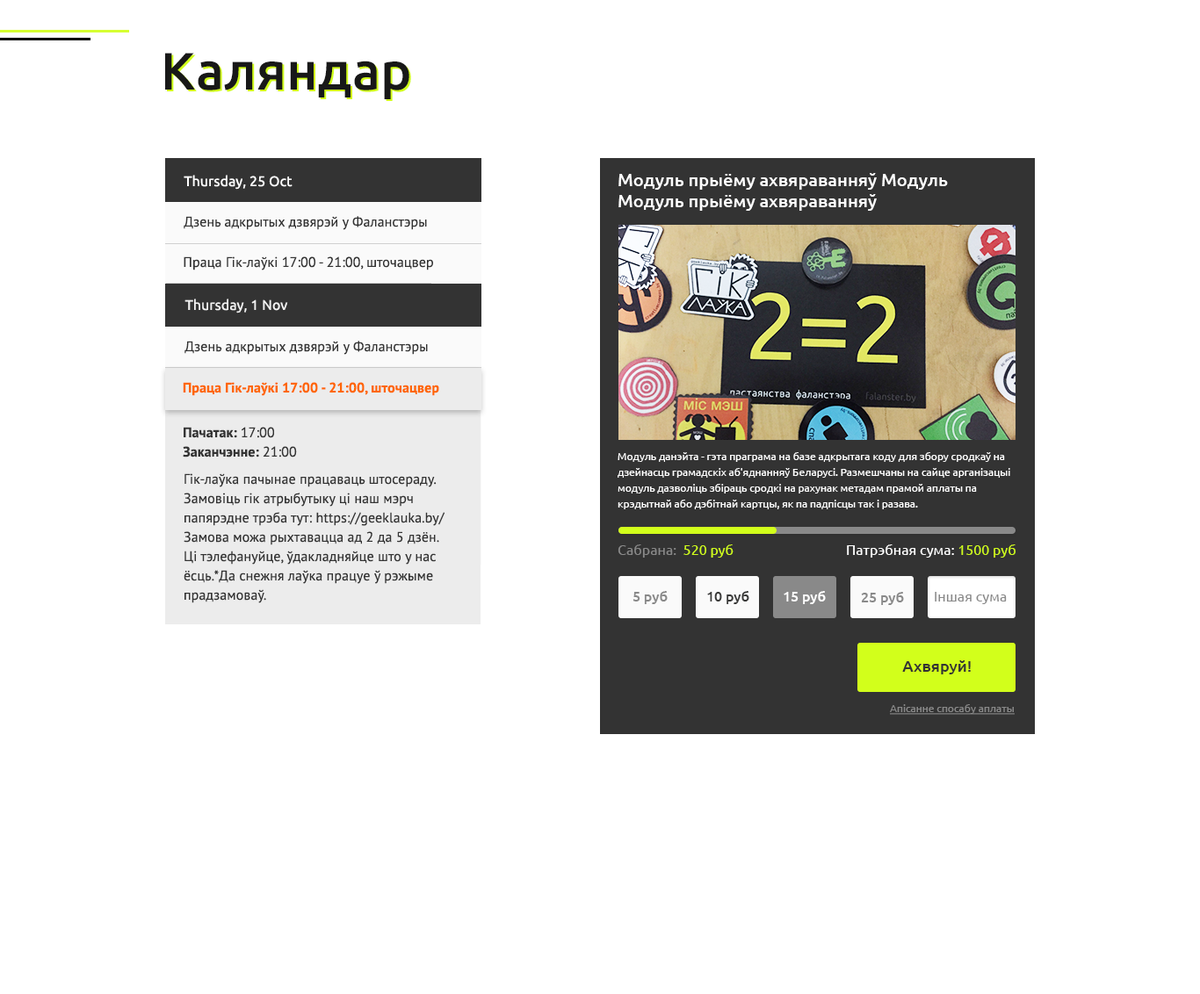
<style>
.page{position:relative;width:1200px;height:994px;background:#ffffff}
.page>*{position:absolute;margin:0}
.t1{font:52.7px "Ubuntu-Medium";letter-spacing:0.005em;color:#181818}
.t2{font:52.7px "Ubuntu-Medium";letter-spacing:0.005em}
.t3{font:17.6px/21.1px "Ubuntu-Medium";color:#ffffff}
.t4{font:14.1px "Ubuntu-Regular";letter-spacing:0.005em;color:#ffffff}
.t5{font:14.1px "PTSans-Regular";letter-spacing:0.005em;color:#333333}
.t6{font:14.1px "Ubuntu-Regular";letter-spacing:0.005em;color:#f2f2f2}
.t7{font:14.1px "PTSans-Bold";letter-spacing:0.005em;color:#ff6600}
.t8{font:14.1px/19.3px "PTSans-Bold";letter-spacing:0.005em;color:#333333}
.t9{font:14.1px/19.3px "PTSans-Regular";letter-spacing:0.005em;color:#333333}
.t10{font:10.5px/15.8px "Ubuntu-Regular";color:#ffffff}
.t11{font:14.1px "Ubuntu-Regular";color:#898989}
.t12{font:14.1px "Ubuntu-Regular";color:#d2ff1b}
.t13{font:14.1px "Ubuntu-Regular";color:#ffffff}
.t14{font:14.1px "Ubuntu-Medium";color:#898989}
.t15{font:14.1px "Ubuntu-Medium";color:#3a3a39}
.t16{font:14.1px "Ubuntu-Medium";color:#ffffff}
.t17{font:15.8px "Ubuntu-Medium";color:#333333}
.t18{font:10.5px "Ubuntu-Regular";color:#898989;text-decoration:underline}
</style>
<div class="page">
<p class="t1" style="left:165px;top:53px;width:244px;height:46px">Каляндар</p>
<p class="t2" style="left:167px;top:54px;width:244px;height:47px">Каляндар</p>
<p class="t3" style="left:618px;top:173px;width:330px;height:38px">Модуль прыёму ахвяраванняў Модуль <br>Модуль прыёму ахвяраванняў</p>
<p class="t4" style="left:184px;top:175px;width:108px;height:15px">Thursday, 25 Oct</p>
<p class="t5" style="left:184px;top:216px;width:243px;height:14px">Дзень адкрытых дзвярэй у Фаланстэры</p>
<p class="t5" style="left:184px;top:256px;width:249px;height:14px">Праца Гік-лаўкі 17:00 - 21:00, шточацвер</p>
<p class="t6" style="left:184px;top:299px;width:104px;height:14px">Thursday, 1 Nov</p>
<p class="t5" style="left:184px;top:341px;width:244px;height:14px">Дзень адкрытых дзвярэй у Фаланстэры</p>
<p class="t7" style="left:183px;top:382px;width:256px;height:14px">Праца Гік-лаўкі 17:00 - 21:00, шточацвер</p>
<p class="t8" style="left:183px;top:427px;width:114px;height:31px">Пачатак: <span class="t9">17:00<br></span>Заканчэнне: <span class="t9">21:00</span></p>
<p class="t10" style="left:617px;top:452px;width:393px;height:57px">Модуль данэйта - гэта праграма на базе адкрытага коду для збору сродкаў на <br>дзейнасць грамадскіх аб'яднанняў Беларусі. Размешчаны на сайце арганізацыі <br>модуль дазволіць збіраць сродкі на рахунак метадам прамой аплаты па <br>крэдытнай або дэбітнай картцы, як па падпісцы так і разава.</p>
<p class="t9" style="left:184px;top:473px;width:261px;height:130px">Гік-лаўка пачынае працаваць штосераду.<br>Замовіць гік атрыбутыку ці наш мэрч <br>папярэдне трэба тут: https://geeklauka.by/<br>Замова можа рыхтавацца ад 2 да 5 дзён. <br>Ці тэлефануйце, ўдакладняйце што у нас <br>ёсць.*Да снежня лаўка працуе ў рэжыме <br>прадзамоваў.</p>
<p class="t11" style="left:617px;top:544px;width:116px;height:14px">Сабрана:  <span class="t12">520 руб</span></p>
<p class="t13" style="left:847px;top:544px;width:168px;height:14px">Патрэбная сума: <span class="t12">1500 руб</span></p>
<p class="t14" style="left:632px;top:591px;width:35px;height:13px">5 руб</p>
<p class="t15" style="left:707px;top:591px;width:42px;height:13px">10 руб</p>
<p class="t16" style="left:783px;top:591px;width:42px;height:13px">15 руб</p>
<p class="t14" style="left:861px;top:592px;width:43px;height:13px">25 руб</p>
<p class="t11" style="left:934px;top:592px;width:72px;height:12px">Iншая сума</p>
<p class="t17" style="left:902px;top:660px;width:68px;height:14px">Ахвяруй!</p>
<p class="t18" style="left:890px;top:704px;width:124px;height:11px">Апiсанне спосабу аплаты</p>
</div>
